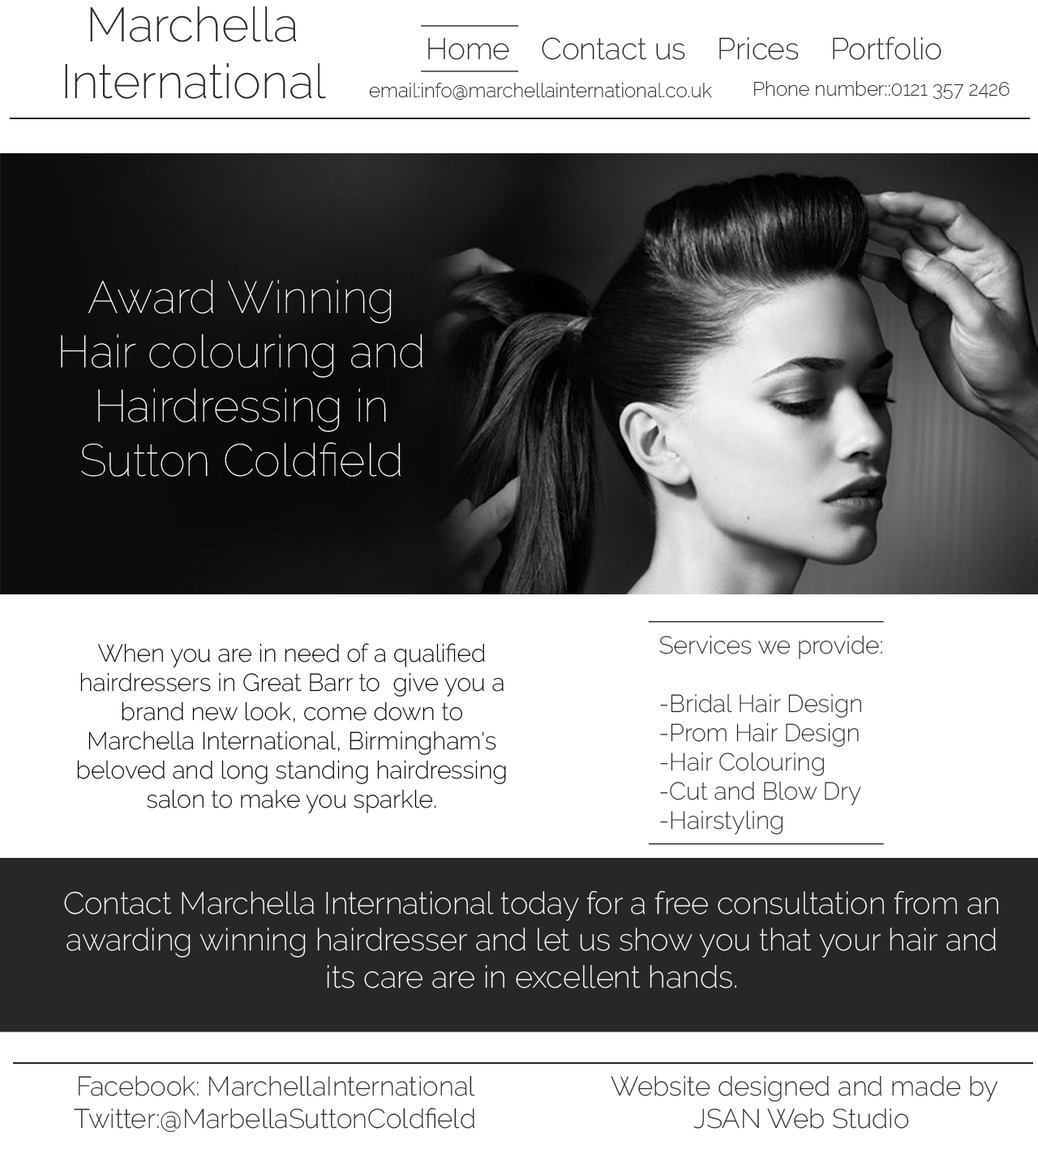
<style>
.page{position:relative;width:1038px;height:1149px;background:#ffffff}
.page>*{position:absolute;margin:0}
.t1{font:47.9px "Raleway-ExtraLight";color:#272727}
.t2{font:29.9px "Raleway-ExtraLight";color:#272727}
.t3{font:19.5px "Raleway-ExtraLight";color:#272727}
.t4{font:45.3px "Raleway-Thin";color:#ffffff}
.t5{font:24.3px "Raleway-ExtraLight";color:#272727}
.t6{font:24.3px "Raleway-ExtraLight";color:#000000}
.t7{font:30.7px "Raleway-ExtraLight";color:#ffffff}
.t8{font:26.8px "Raleway-ExtraLight";color:#272727}
</style>
<div class="page">
<p class="t1" style="left:65px;top:6px;width:261px;height:93px;text-align:center">Marchella <br>International</p>
<p class="t2" style="left:428px;top:36px;width:513px;height:24px">Home    Contact us    Prices    Portfolio</p>
<p class="t3" style="left:369px;top:83px;width:343px;height:17px">email:info@marchellainternational.co.uk</p>
<p class="t3" style="left:754px;top:81px;width:255px;height:18px">Phone number::0121 357 2426</p>
<p class="t4" style="left:61px;top:280px;width:361px;height:197px;text-align:center">Award Winning<br>Hair colouring and Hairdressing in Sutton Coldfield</p>
<p class="t5" style="left:659px;top:635px;width:223px;height:199px">Services we provide:<br><br>-Bridal Hair Design<br>-Prom Hair Design<br>-Hair Colouring<br>-Cut and Blow Dry<br>-Hairstyling</p>
<p class="t6" style="left:77px;top:643px;width:429px;height:170px;text-align:center">When you are in need of a qualified <br>hairdressers in Great Barr to  give you a brand new look, come down to <br>Marchella International, Birmingham's beloved and long standing hairdressing salon to make you sparkle.</p>
<p class="t7" style="left:64px;top:890px;width:934px;height:98px;text-align:center">Contact Marchella International today for a free consultation from an awarding winning hairdresser and let us show you that your hair and its care are in excellent hands.</p>
<p class="t8" style="left:74px;top:1075px;width:401px;height:57px;text-align:center">Facebook: MarchellaInternational  <br>Twitter:@MarbellaSuttonColdfield</p>
<p class="t8" style="left:611px;top:1075px;width:386px;height:54px;text-align:center">Website designed and made by JSAN Web Studio</p>
</div>
